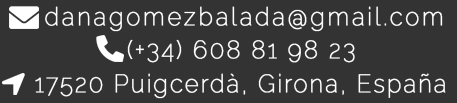
<style>
.page{position:relative;width:457px;height:103px;background:#333333}
.page>*{position:absolute;margin:0}
.t1{font:25px "Raleway-Thin";letter-spacing:0.1em;color:#ffffff;font-weight:bold;scale:0.95 1}
.t2{font:25px "Raleway-Thin";letter-spacing:0.08em;color:#ffffff;font-weight:bold;scale:0.95 1}
.t3{font:25px "Raleway-Thin";letter-spacing:0.07em;color:#ffffff;font-weight:bold;scale:0.95 1}
</style>
<div class="page">
<p class="t1" style="left:45px;top:6px;width:398px;height:26px">danagomezbalada@gmail.com</p>
<p class="t2" style="left:127px;top:39px;width:228px;height:24px">(+34) 608 81 98 23</p>
<p class="t3" style="left:35px;top:73px;width:411px;height:26px">17520 Puigcerdà, Girona, España</p>
</div>
